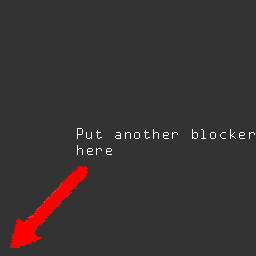
<style>
.page{position:relative;width:256px;height:256px;background:#333333}
.page>*{position:absolute;margin:0}
.t1{font:13.3px "OCRAStd";color:#ffffff}
</style>
<div class="page">
<p class="t1" style="left:77px;top:128px;width:178px;height:27px">Put another blocker<br>here</p>
</div>
